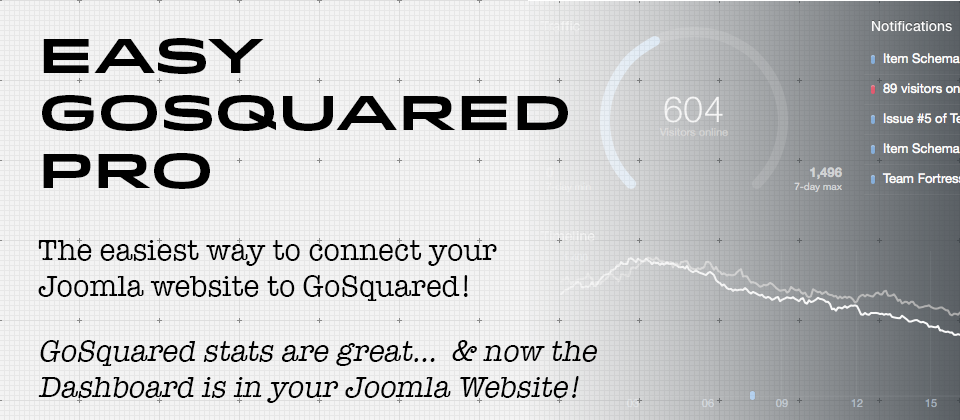
<style>
.page{position:relative;width:960px;height:420px;background:#f3f3f3}
.page>*{position:absolute;margin:0}
.t1{font:48px "Idlewild-Bold";color:#000000}
.t2{font:30px "AmericanTypewriter";color:#000000}
.t3{font:30px "AmericanTypewriter";color:#000000;font-style:italic}
</style>
<div class="page">
<p class="t1" style="left:42px;top:38px;width:526px;height:93px">Easy<br>GoSquared</p>
<p class="t1" style="left:43px;top:153px;width:167px;height:36px">Pro</p>
<p class="t2" style="left:38px;top:240px;width:459px;height:126px">The easiest way to connect your Joomla website to GoSquared!<br><br><span class="t3">GoSquared stats are great…</span></p>
<p class="t3" style="left:38px;top:340px;width:559px;height:63px"><span class="t2"><br><br><br></span>                                                       &amp; now the Dashboard is in your Joomla Website!</p>
</div>
